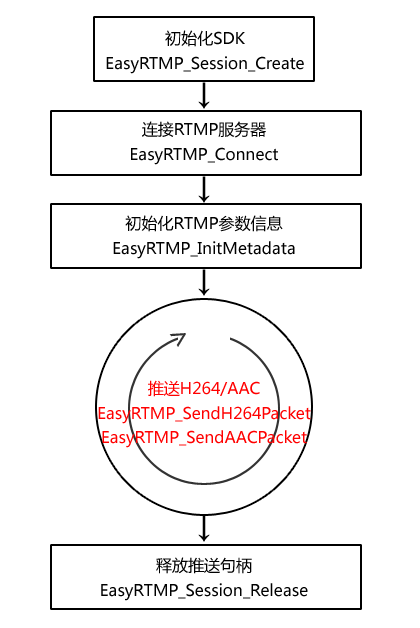
<style>
.page{position:relative;width:420px;height:628px;background:#ffffff}
.page>*{position:absolute;margin:0}
.t1{font:16px/24.6px "MicrosoftYaHei";color:#000000}
.t2{font:30px "MicrosoftYaHei";color:#000000}
.t3{font:30px "MicrosoftYaHei";color:#333333}
.t4{font:16px/24.6px "MicrosoftYaHei";color:#ff0000}
</style>
<div class="page">
<p class="t1" style="left:106px;top:30px;width:198px;height:44px;text-align:center">初始化SDK<br>EasyRTMP_Session_Create</p>
<p class="t2" style="left:198px;top:82px;width:12px;height:27px">↓</p>
<p class="t1" style="left:131px;top:121px;width:147px;height:44px;text-align:center">连接RTMP服务器<br>EasyRTMP_Connect</p>
<p class="t2" style="left:198px;top:176px;width:12px;height:27px">↓</p>
<p class="t1" style="left:113px;top:215px;width:182px;height:44px;text-align:center">初始化RTMP参数信息<br>EasyRTMP_InitMetadata</p>
<p class="t2" style="left:198px;top:269px;width:12px;height:27px">↓</p>
<p class="t3" style="left:169px;top:333px;width:17px;height:14px;rotate:-33deg">&gt;</p>
<p class="t4" style="left:98px;top:380px;width:213px;height:68px;text-align:center">推送H264/AAC<br>EasyRTMP_SendH264Packet<br>EasyRTMP_SendAACPacket</p>
<p class="t2" style="left:198px;top:515px;width:12px;height:27px">↓</p>
<p class="t1" style="left:101px;top:557px;width:207px;height:44px;text-align:center">释放推送句柄<br>EasyRTMP_Session_Release</p>
</div>
